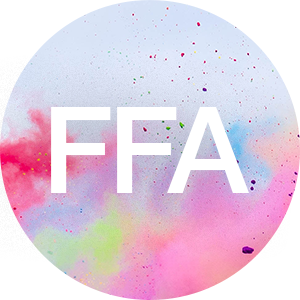
<style>
.page{position:relative;width:300px;height:300px;background:#ffffff}
.page>*{position:absolute;margin:0}
.t1{font:120px "HelveticaNeue-Medium";letter-spacing:-0.04em;color:#ffffff}
</style>
<div class="page">
<p class="t1" style="left:51px;top:107px;width:198px;height:86px">FFA</p>
</div>
